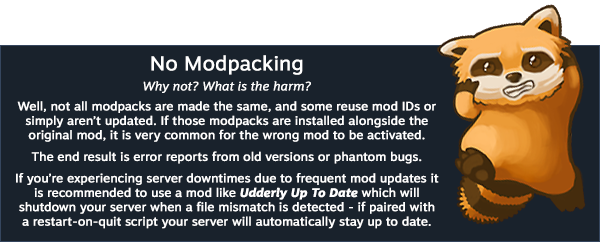
<style>
.page{position:relative;width:600px;height:242px;background:#19222c}
.page>*{position:absolute;margin:0}
.t1{font:12px "MotivaSans-Regular";color:#ffffff;font-weight:bold}
.t2{font:20px "MotivaSans-Regular";color:#ffffff;font-weight:bold}
.t3{font:12px/20px "MotivaSans-LightItalic";color:#ffffff;font-weight:bold}
.t4{font:12px/20px "MotivaSans-Regular";color:#ffffff;font-weight:bold}
.t5{font:12px "MotivaSans-BoldItalic";color:#ffffff;font-weight:bold}
</style>
<div class="page">
<p class="t1" style="left:16px;top:55px;width:423px;height:174px;text-align:center"><span class="t2">No Modpacking<br></span><span class="t3">Why not? What is the harm?<br></span><span class="t4">W</span>ell, not all modpacks are made the same, and some reuse mod IDs or simply aren’t updated. If those modpacks are installed alongside the original mod, it is very common for the wrong mod to be activated.<br> <br>The end result is error reports from old versions or phantom bugs. <br> <br>If you’re experiencing server downtimes due to frequent mod updates it is recommended to use a mod like <span class="t5">Udderly Up To Date</span> which will shutdown your server when a file mismatch is detected - if paired with <br>a restart-on-quit script your server will automatically stay up to date.</p>
</div>
